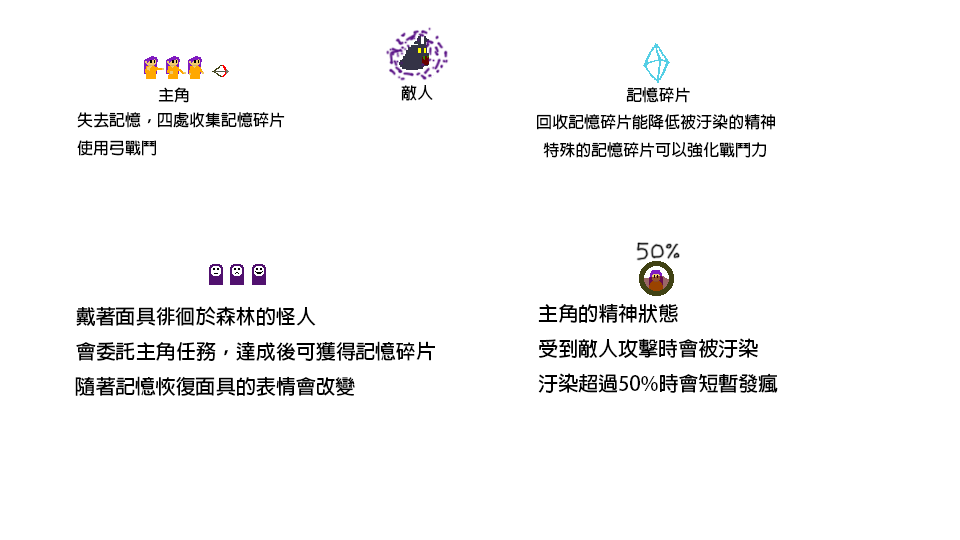
<style>
.page{position:relative;width:960px;height:540px;background:#ffffff}
.page>*{position:absolute;margin:0}
.t1{font:16px "AdobeFanHeitiStd-Bold";color:#000000}
.t2{font:20px "AdobeFanHeitiStd-Bold";color:#000000}
</style>
<div class="page">
<p class="t1" style="left:158px;top:87px;width:31px;height:16px">主角</p>
<p class="t1" style="left:401px;top:85px;width:32px;height:16px">敵人</p>
<p class="t1" style="left:626px;top:87px;width:64px;height:16px">記憶碎片</p>
<p class="t1" style="left:77px;top:112px;width:208px;height:44px">失去記憶，四處收集記憶碎片<br>使用弓戰鬥</p>
<p class="t1" style="left:537px;top:114px;width:238px;height:44px">回收記憶碎片能降低被汙染的精神<br>  特殊的記憶碎片可以強化戰鬥力</p>
<p class="t2" style="left:538px;top:303px;width:240px;height:90px">主角的精神狀態<br>受到敵人攻擊時會被汙染<br>汙染超過50%時會短暫發瘋</p>
<p class="t2" style="left:75px;top:306px;width:360px;height:90px">戴著面具徘徊於森林的怪人<br>會委託主角任務，達成後可獲得記憶碎片<br>隨著記憶恢復面具的表情會改變</p>
</div>
